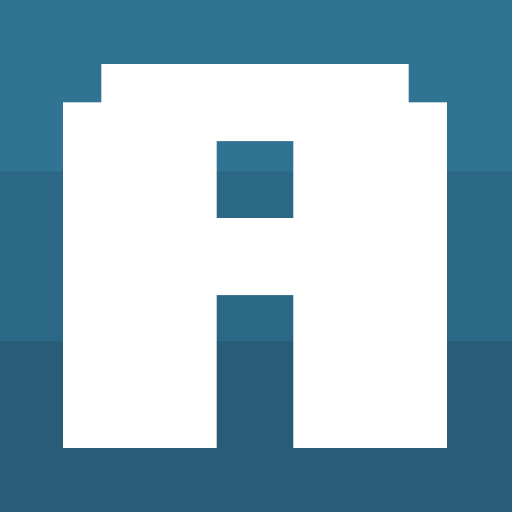
<style>
.page{position:relative;width:512px;height:512px;background:#ffffff}
.page>*{position:absolute;margin:0}
.t1{font:460.8px "8BITWONDERNominal";letter-spacing:0.025em;color:#ffffff}
</style>
<div class="page">
<p class="t1" style="left:63px;top:64px;width:384px;height:384px">A</p>
</div>
